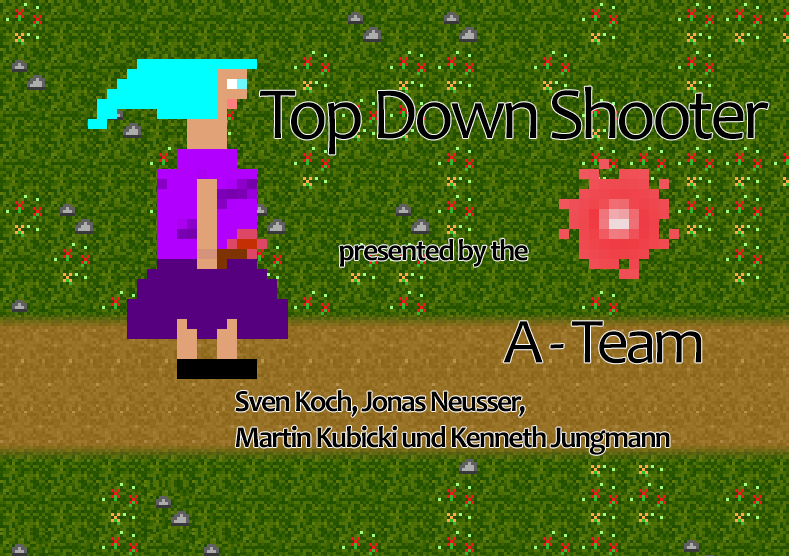
<style>
.page{position:relative;width:789px;height:556px}
.page>*{position:absolute;margin:0}
.t1{font:74.2px "Candara";letter-spacing:-0.06em;color:#000000}
.t2{font:30.5px "Candara-Bold";letter-spacing:-0.06em;color:#000000}
.t3{font:65.1px "Candara";letter-spacing:-0.06em;color:#000000}
</style>
<div class="page">
<p class="t1" style="left:260px;top:86px;width:509px;height:69px">Top Down Shooter</p>
<p class="t2" style="left:339px;top:239px;width:189px;height:28px">presented by the</p>
<p class="t3" style="left:503px;top:321px;width:199px;height:43px">A - Team</p>
<p class="t2" style="left:235px;top:390px;width:435px;height:65px">Sven Koch, Jonas Neusser,<br>Martin Kubicki und Kenneth Jungmann</p>
</div>
